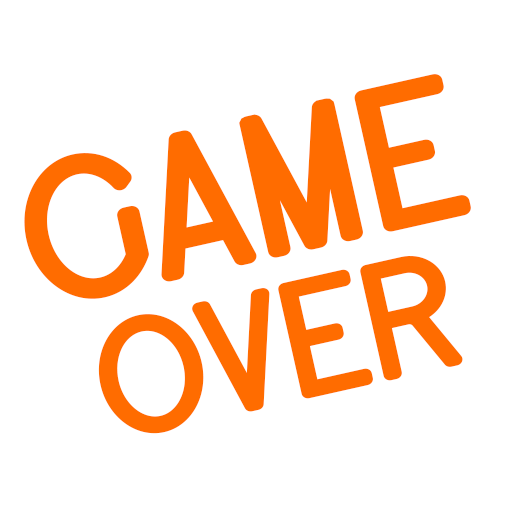
<style>
.page{position:relative;width:512px;height:512px;background:#ffffff}
.page>*{position:absolute;margin:0}
.t1{font:207.2px "HarlowRegular";color:#ff6c00}
.t2{font:169.4px "HarlowRegular";color:#ff6c00}
</style>
<div class="page">
<p class="t1" style="left:24px;top:74px;width:447px;height:225px;rotate:-13deg">GAME</p>
<p class="t2" style="left:98px;top:256px;width:365px;height:178px;rotate:-13deg">OVER</p>
</div>
